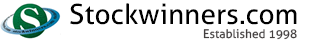
<style>
.page{position:relative;width:310px;height:41px;background:#ffffff}
.page>*{position:absolute;margin:0}
.t1{font:28px "Aller";color:#000000}
.t2{font:12px "Aller";color:#444040}
</style>
<div class="page">
<p class="t1" style="left:70px;top:3px;width:227px;height:22px">Stockwinners.com</p>
<p class="t2" style="left:203px;top:29px;width:94px;height:11px">Established 1998</p>
</div>
